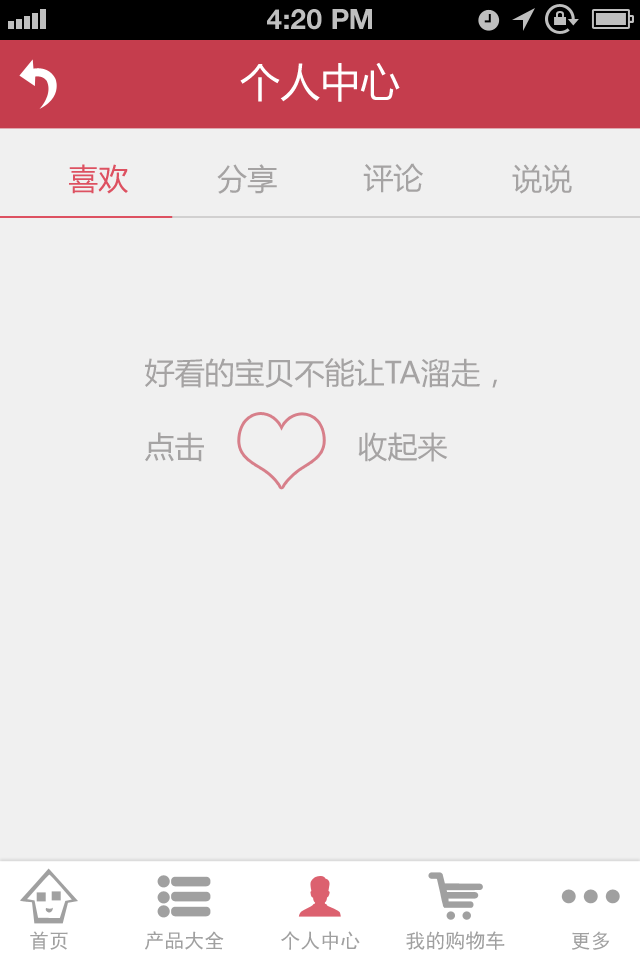
<style>
.page{position:relative;width:640px;height:960px;background:#f0f0f0}
.page>*{position:absolute;margin:0}
.t1{font:28px "HelveticaNeue-Bold";color:#bfbfbf;text-transform:uppercase}
.t2{font:40px "MicrosoftYaHei";color:#ffffff;text-transform:uppercase}
.t3{font:30px "MicrosoftYaHei";color:#dd5161;text-transform:uppercase}
.t4{font:30px "MicrosoftYaHei";color:#a5a3a3;text-transform:uppercase}
.t5{font:30px/74px "MicrosoftYaHei";color:#a5a3a3;text-transform:uppercase}
.t6{font:20px "SimHei";color:#a0a0a0}
</style>
<div class="page">
<p class="t1" style="left:267px;top:9px;width:105px;height:21px">4:20 PM</p>
<p class="t2" style="left:240px;top:62px;width:160px;height:40px">个人中心</p>
<p class="t3" style="left:69px;top:164px;width:59px;height:30px">喜欢</p>
<p class="t4" style="left:217px;top:164px;width:60px;height:30px">分享</p>
<p class="t4" style="left:363px;top:163px;width:60px;height:30px">评论</p>
<p class="t4" style="left:512px;top:164px;width:60px;height:30px">说说</p>
<p class="t5" style="left:145px;top:358px;width:352px;height:104px;text-align:center">好看的宝贝不能让TA溜走，<br>点击                 收起来</p>
<p class="t6" style="left:30px;top:931px;width:38px;height:19px">首页</p>
<p class="t6" style="left:145px;top:931px;width:79px;height:19px">产品大全</p>
<p class="t6" style="left:281px;top:931px;width:79px;height:19px">个人中心</p>
<p class="t6" style="left:406px;top:931px;width:99px;height:19px">我的购物车</p>
<p class="t6" style="left:572px;top:931px;width:38px;height:19px">更多</p>
</div>
